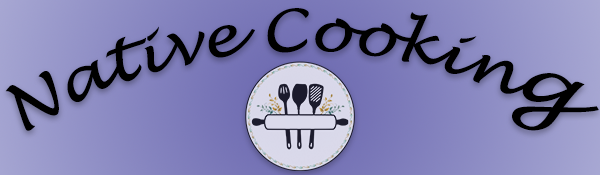
<style>
.page{position:relative;width:600px;height:175px}
.page>*{position:absolute;margin:0}
.t1{font:58.3px "LucidaHandwriting-Italic";color:#000000}
.t2{font:75px "LucidaHandwriting-Italic";color:#000000}
</style>
<div class="page">
<p class="t1" style="left:5px;top:8px;width:594px;height:123px">Native Cookin<span class="t2">g</span></p>
</div>
